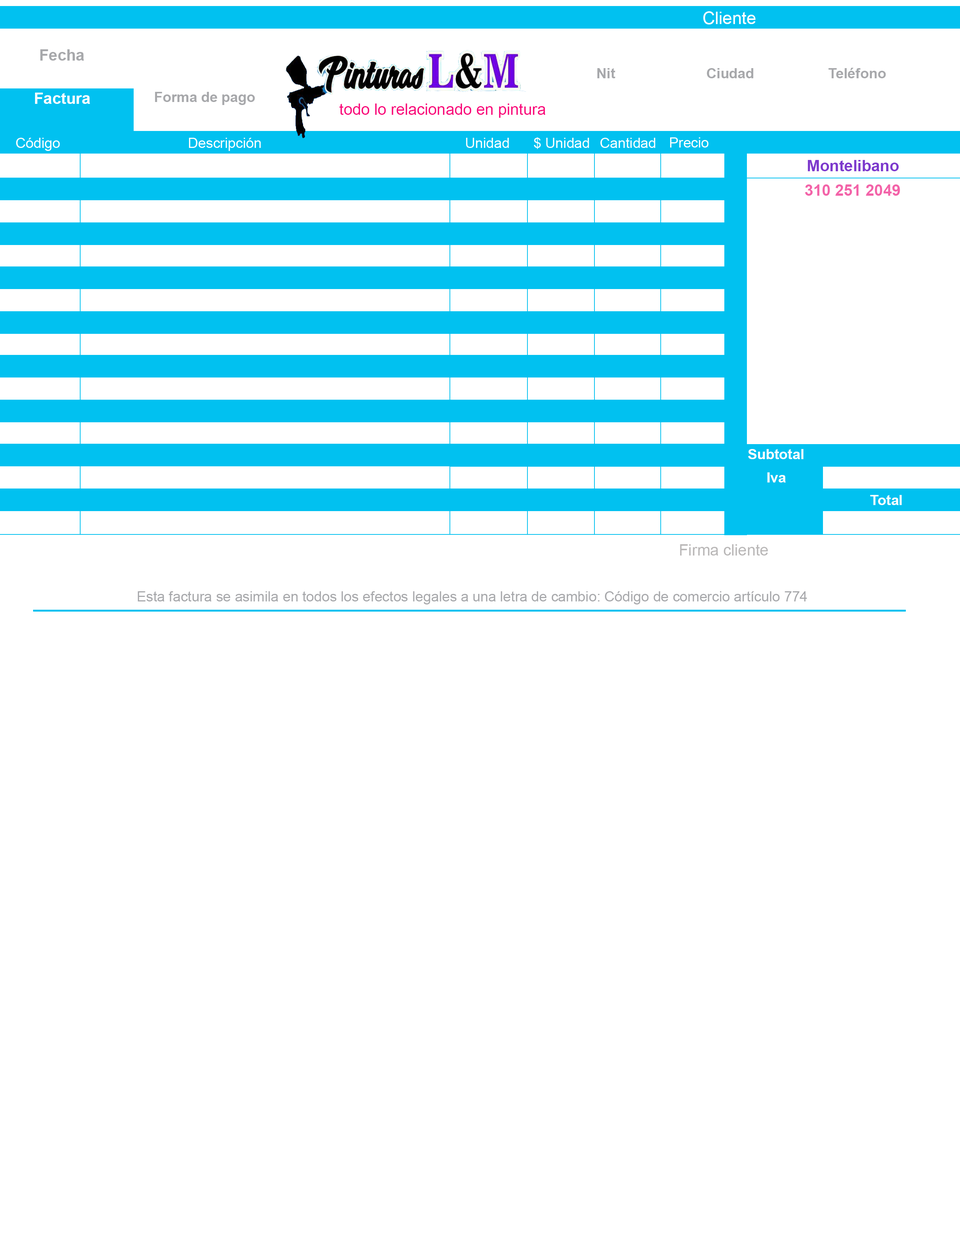
<style>
.page{position:relative;width:960px;height:1242px;background:#ffffff}
.page>*{position:absolute;margin:0}
.t1{font:17.3px "ArialMT";color:#ffffff}
.t2{font:15.7px "Arial-BoldMT";color:#a7a8ab}
.t3{font:14.1px "Arial-BoldMT";color:#a7a8ab}
.t4{font:15.7px "Arial-BoldMT";color:#ffffff}
.t5{font:15.7px "ArialMT";color:#f90379}
.t6{font:15.7px "Arial-BoldMT";color:#7d39cd}
.t7{font:15.7px "Arial-BoldMT";color:#f363a9}
.t8{font:14.1px "Arial-BoldMT";color:#ffffff}
.t9{font:15.7px "ArialMT";color:#b9b7b7}
.t10{font:14.1px "ArialMT";color:#a7a8ab}
</style>
<div class="page">
<p class="t1" style="left:703px;top:11px;width:53px;height:13px">Cliente</p>
<p class="t2" style="left:40px;top:49px;width:44px;height:12px">Fecha</p>
<p class="t3" style="left:597px;top:68px;width:18px;height:10px">Nit</p>
<p class="t3" style="left:707px;top:68px;width:46px;height:10px">Ciudad</p>
<p class="t3" style="left:828px;top:68px;width:58px;height:10px">Teléfono</p>
<p class="t4" style="left:35px;top:93px;width:55px;height:11px">Factura</p>
<p class="t3" style="left:155px;top:92px;width:100px;height:13px">Forma de pago</p>
<p class="t5" style="left:339px;top:104px;width:206px;height:14px">todo lo relacionado en pintura</p>
<p class="t6" style="left:807px;top:160px;width:92px;height:11px">Montelibano</p>
<p class="t7" style="left:805px;top:184px;width:95px;height:12px">310 251 2049</p>
<p class="t8" style="left:748px;top:449px;width:55px;height:10px">Subtotal</p>
<p class="t8" style="left:767px;top:472px;width:19px;height:11px">Iva</p>
<p class="t8" style="left:870px;top:495px;width:32px;height:10px">Total</p>
<p class="t9" style="left:680px;top:544px;width:88px;height:12px">Firma cliente</p>
<p class="t10" style="left:138px;top:591px;width:669px;height:14px">Esta factura se asimila en todos los efectos legales a una letra de cambio: Código de comercio artículo 774</p>
</div>
